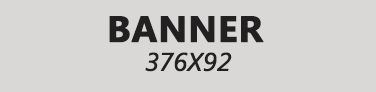
<style>
.page{position:relative;width:376px;height:92px;background:#dad7d7}
.page>*{position:absolute;margin:0}
.t1{font:36.3px "SegoeUI-Bold";color:#222020;text-transform:uppercase;font-weight:bold}
.t2{font:25.4px "SegoeUI-Italic";color:#222020;text-transform:uppercase;font-weight:bold}
</style>
<div class="page">
<p class="t1" style="left:109px;top:16px;width:155px;height:27px">BANNER</p>
<p class="t2" style="left:145px;top:52px;width:87px;height:20px">376x92</p>
</div>
